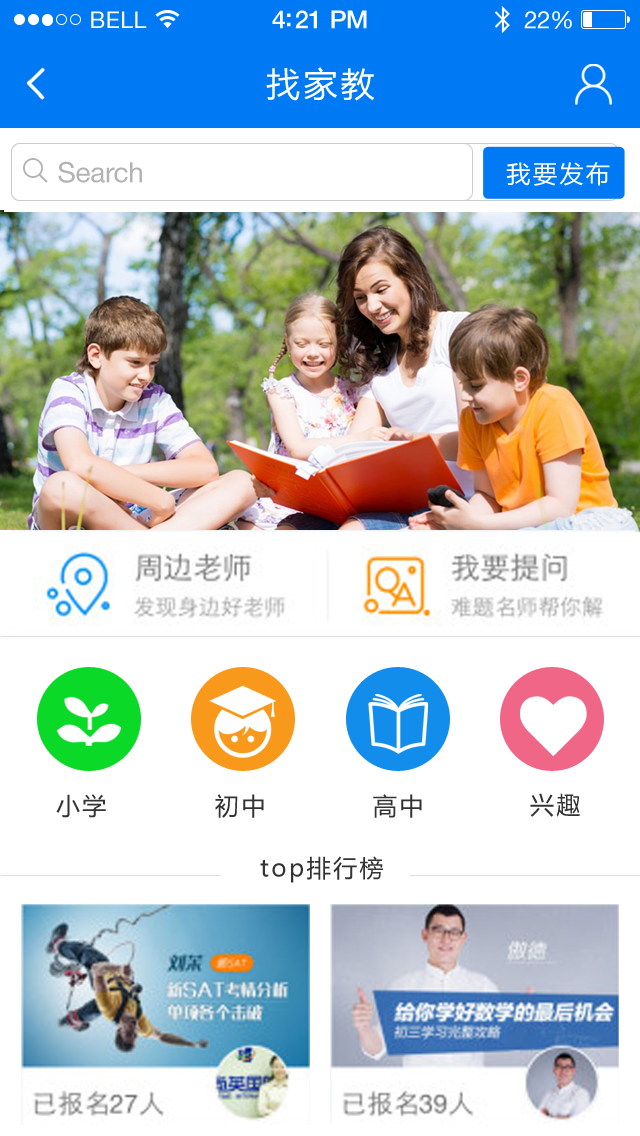
<style>
.page{position:relative;width:640px;height:1136px;background:#ffffff}
.page>*{position:absolute;margin:0}
.t1{font:23px "HelveticaNeue";letter-spacing:0.02em;color:#ffffff}
.t2{font:25px "HelveticaNeue-Medium";letter-spacing:-0.02em;color:#ffffff}
.t3{font:24px "HelveticaNeue";letter-spacing:-0.02em;color:#ffffff}
.t4{font:34px "MicrosoftYaHei";letter-spacing:0.1em;color:#ffffff}
.t5{font:28px "HelveticaNeue";letter-spacing:-0.01em;color:#b3b3b3}
.t6{font:24px "MicrosoftYaHei";letter-spacing:0.1em;color:#ffffff}
.t7{font:24px "MicrosoftYaHei";letter-spacing:0.1em;color:#333333}
</style>
<div class="page">
<p class="t1" style="left:91px;top:11px;width:56px;height:17px">BELL</p>
<p class="t2" style="left:272px;top:10px;width:95px;height:19px">4:21 PM</p>
<p class="t3" style="left:524px;top:11px;width:48px;height:18px">22%</p>
<p class="t4" style="left:266px;top:67px;width:109px;height:34px">找家教</p>
<p class="t5" style="left:58px;top:161px;width:84px;height:22px">Search</p>
<p class="t6" style="left:506px;top:162px;width:104px;height:24px">我要发布</p>
<p class="t7" style="left:56px;top:794px;width:50px;height:24px">小学</p>
<p class="t7" style="left:215px;top:794px;width:49px;height:24px">初中</p>
<p class="t7" style="left:373px;top:794px;width:49px;height:24px">高中</p>
<p class="t7" style="left:530px;top:793px;width:50px;height:24px">兴趣</p>
<p class="t7" style="left:260px;top:856px;width:123px;height:27px">top排行榜</p>
</div>
